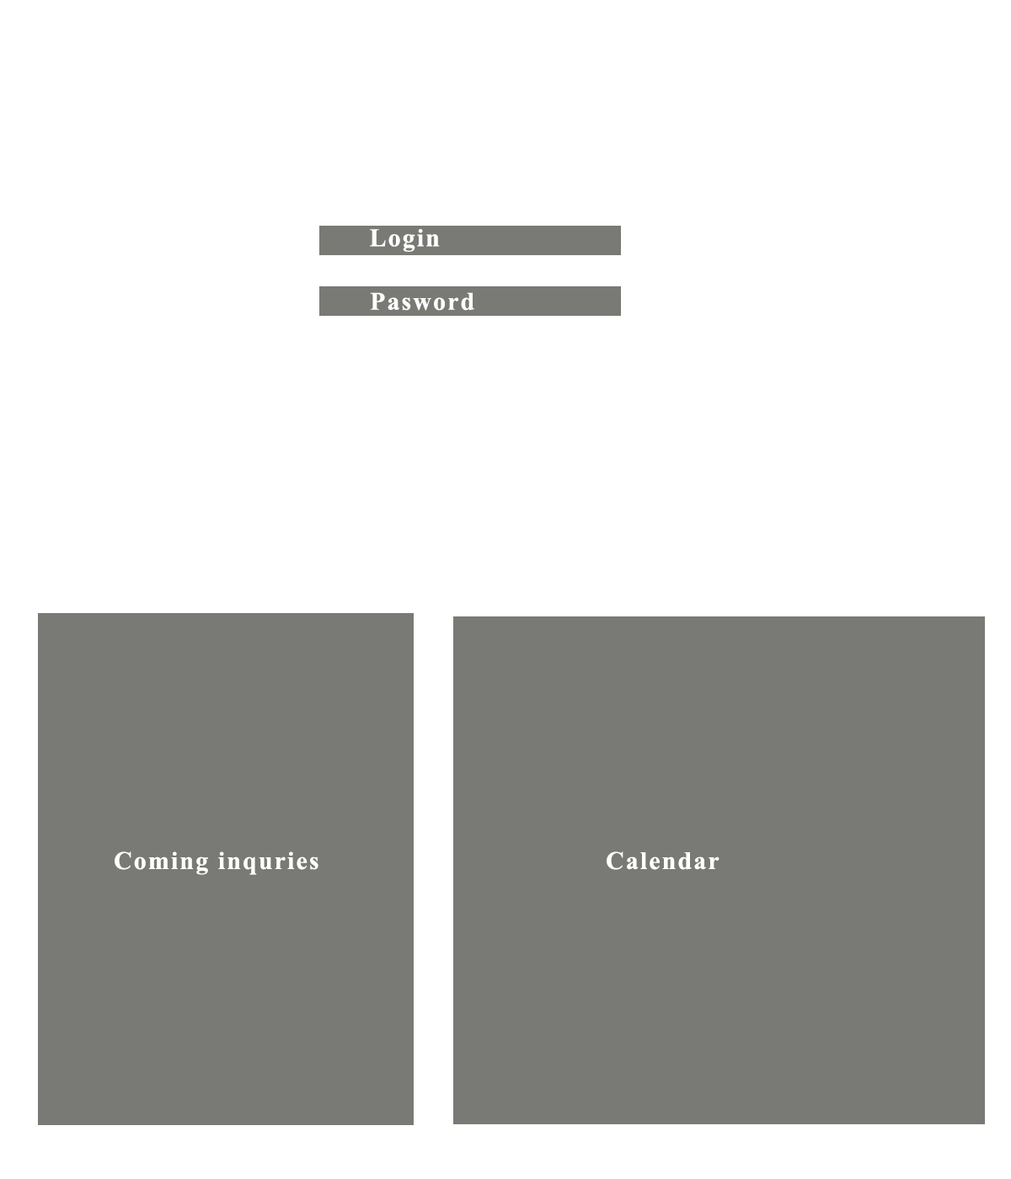
<style>
.page{position:relative;width:1011px;height:1179px;background:#ffffff}
.page>*{position:absolute;margin:0}
.t1{font:25.3px "TimesNewRomanPS-BoldMT";letter-spacing:0.07em;color:#ffffff}
</style>
<div class="page">
<p class="t1" style="left:370px;top:228px;width:70px;height:24px">Login</p>
<p class="t1" style="left:370px;top:292px;width:104px;height:19px">Pasword</p>
<p class="t1" style="left:115px;top:852px;width:203px;height:23px">Coming inquries</p>
<p class="t1" style="left:607px;top:852px;width:112px;height:18px">Calendar</p>
</div>
